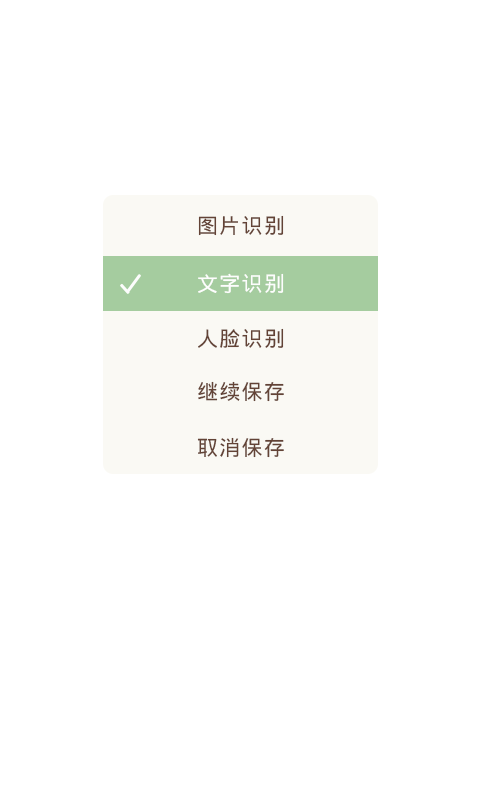
<style>
.page{position:relative;width:480px;height:800px;background:#ffffff}
.page>*{position:absolute;margin:0}
.t1{font:21px "DroidSansFallback";letter-spacing:0.06em;color:#634336}
.t2{font:21px "DroidSansFallback";letter-spacing:0.06em;color:#fdfdfd}
</style>
<div class="page">
<p class="t1" style="left:198px;top:215px;width:86px;height:21px">图片识别</p>
<p class="t2" style="left:198px;top:273px;width:86px;height:21px">文字识别</p>
<p class="t1" style="left:198px;top:328px;width:86px;height:20px">人脸识别</p>
<p class="t1" style="left:198px;top:381px;width:86px;height:21px">继续保存</p>
<p class="t1" style="left:197px;top:437px;width:87px;height:21px">取消保存</p>
</div>
